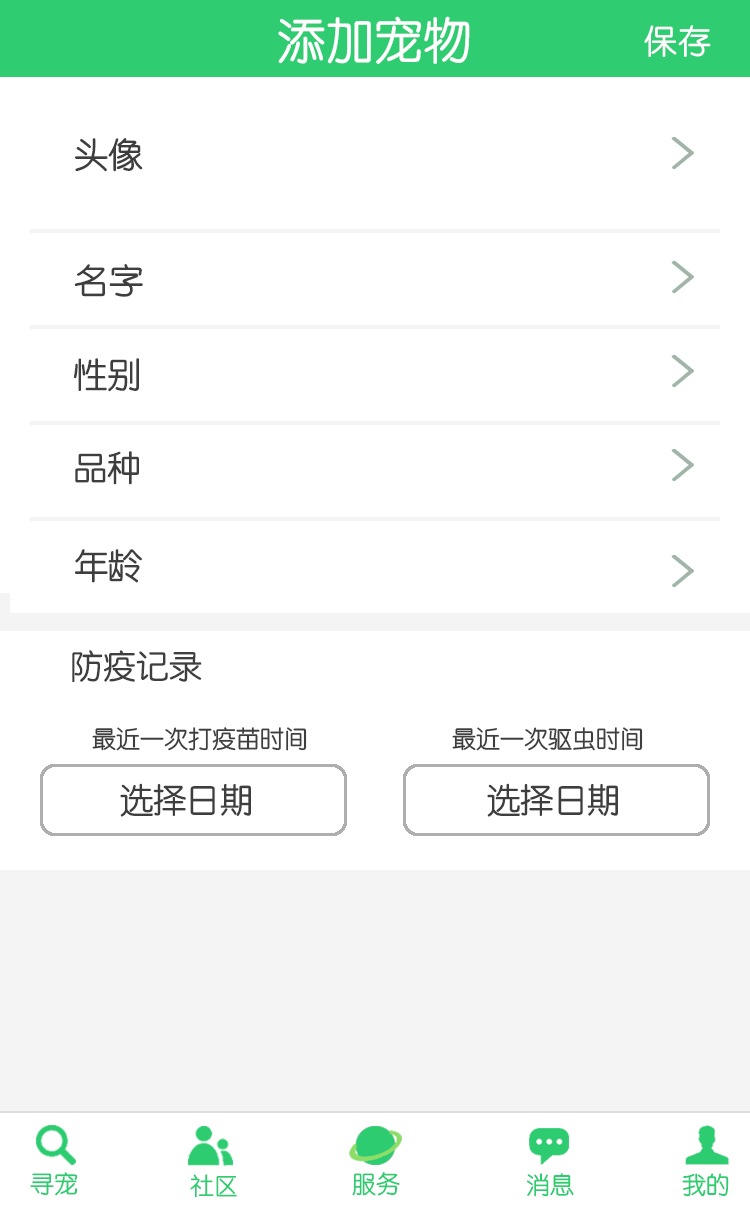
<style>
.page{position:relative;width:750px;height:1206px;background:#ffffff}
.page>*{position:absolute;margin:0}
.t1{font:48.7px "STYuanti-SC-Regular";color:#ffffff}
.t2{font:33px "STYuanti-SC-Regular";color:#ffffff}
.t3{font:34.4px "STYuanti-SC-Regular";color:#3e3e3e}
.t4{font:33px "STYuanti-SC-Regular";color:#3e3e3e}
.t5{font:24px "STYuanti-SC-Regular";color:#3e3e3e}
.t6{font:33.4px "STYuanti-SC-Regular";color:#3e3e3e}
.t7{font:24px "STYuanti-SC-Regular";color:#2ecc71}
.t8{font:24px "STYuanti-SC-Regular"}
</style>
<div class="page">
<p class="t1" style="left:278px;top:16px;width:192px;height:48px">添加宠物</p>
<p class="t2" style="left:644px;top:25px;width:67px;height:32px">保存</p>
<p class="t3" style="left:75px;top:138px;width:68px;height:34px">头像</p>
<p class="t3" style="left:74px;top:264px;width:69px;height:33px">名字</p>
<p class="t3" style="left:74px;top:358px;width:65px;height:34px">性别</p>
<p class="t3" style="left:75px;top:451px;width:64px;height:34px">品种</p>
<p class="t3" style="left:75px;top:549px;width:67px;height:34px">年龄</p>
<p class="t4" style="left:72px;top:650px;width:130px;height:32px">防疫记录</p>
<p class="t5" style="left:92px;top:727px;width:551px;height:24px">最近一次打疫苗时间                        最近一次驱虫时间</p>
<p class="t6" style="left:120px;top:783px;width:498px;height:34px">选择日期                            选择日期</p>
<p class="t7" style="left:30px;top:1172px;width:48px;height:24px">寻宠</p>
<p class="t7" style="left:190px;top:1174px;width:47px;height:24px">社区</p>
<p class="t8" style="left:352px;top:1173px;width:48px;height:24px">服务</p>
<p class="t7" style="left:352px;top:1172px;width:48px;height:24px">服务</p>
<p class="t8" style="left:526px;top:1173px;width:47px;height:24px">消息</p>
<p class="t7" style="left:527px;top:1173px;width:47px;height:24px">消息</p>
<p class="t7" style="left:682px;top:1173px;width:47px;height:24px">我的</p>
<p class="t7" style="left:682px;top:1173px;width:47px;height:24px">我的</p>
</div>
